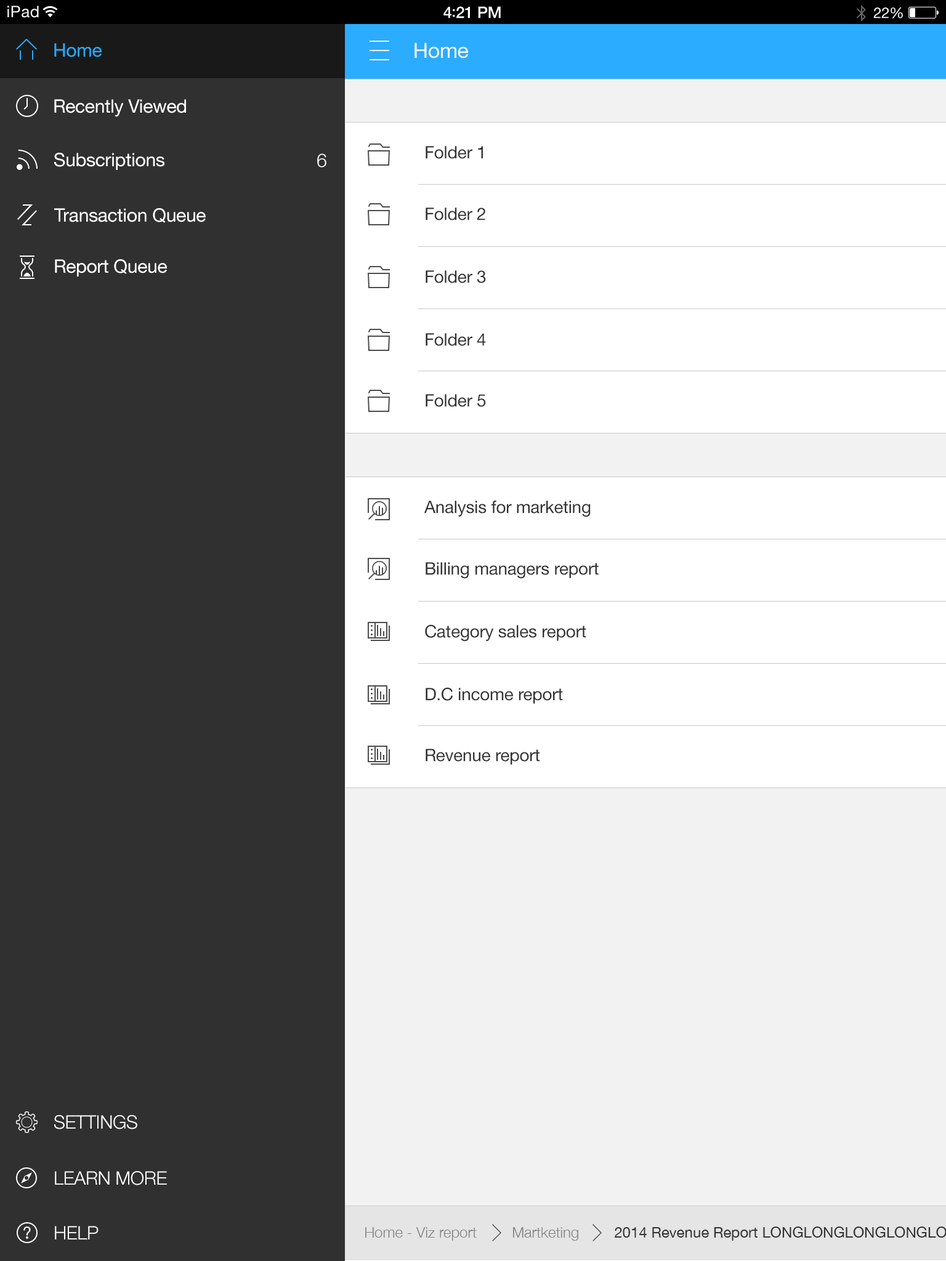
<style>
.page{position:relative;width:946px;height:1261px;background:#303030}
.page>*{position:absolute;margin:0}
.t1{font:16px "HelveticaNeue";letter-spacing:0.02em;color:#ffffff}
.t2{font:16px "HelveticaNeue-Medium";letter-spacing:-0.02em;color:#ffffff}
.t3{font:16px "Avenir-Medium";letter-spacing:-0.02em;color:#ffffff}
.t4{font:14.8px "HelveticaNeue";letter-spacing:-0.02em;color:#ffffff}
.t5{font:18.5px "HelveticaNeue";letter-spacing:-0.01em;color:#2bacfe}
.t6{font:20.9px "HelveticaNeue";letter-spacing:-0.01em;color:#ffffff}
.t7{font:18.5px "HelveticaNeue";letter-spacing:-0.01em;color:#ffffff}
.t8{font:17.2px "HelveticaNeue";letter-spacing:-0.01em;color:#333333}
.t9{font:18.5px "HelveticaNeue-Light";letter-spacing:-0.01em;color:#ffffff}
.t10{font:14.8px "HelveticaNeue-Light";color:#828282}
</style>
<div class="page">
<p class="t1" style="left:7px;top:6px;width:32px;height:12px">iPad</p>
<p class="t2" style="left:443px;top:6px;width:58px;height:12px">4<span class="t3">:</span>21 PM</p>
<p class="t4" style="left:873px;top:7px;width:30px;height:11px">22%</p>
<p class="t5" style="left:54px;top:43px;width:48px;height:14px">Home</p>
<p class="t6" style="left:414px;top:42px;width:54px;height:16px">Home</p>
<p class="t7" style="left:54px;top:99px;width:132px;height:18px">Recently Viewed</p>
<p class="t8" style="left:425px;top:146px;width:58px;height:13px">Folder 1</p>
<p class="t7" style="left:54px;top:153px;width:110px;height:17px">Subscriptions</p>
<p class="t9" style="left:317px;top:153px;width:9px;height:14px">6</p>
<p class="t7" style="left:54px;top:208px;width:152px;height:15px">Transaction Queue</p>
<p class="t8" style="left:425px;top:207px;width:60px;height:13px">Folder 2</p>
<p class="t7" style="left:55px;top:259px;width:112px;height:17px">Report Queue</p>
<p class="t8" style="left:425px;top:270px;width:61px;height:13px">Folder 3</p>
<p class="t8" style="left:425px;top:333px;width:61px;height:13px">Folder 4</p>
<p class="t8" style="left:425px;top:394px;width:61px;height:13px">Folder 5</p>
<p class="t8" style="left:424px;top:501px;width:166px;height:16px">Analysis for marketing</p>
<p class="t8" style="left:425px;top:562px;width:173px;height:17px">Billing managers report</p>
<p class="t8" style="left:425px;top:624px;width:161px;height:18px">Category sales report</p>
<p class="t8" style="left:425px;top:687px;width:138px;height:17px">D.C income report</p>
<p class="t8" style="left:425px;top:749px;width:115px;height:16px">Revenue report</p>
<p class="t9" style="left:54px;top:1115px;width:83px;height:14px">SETTINGS</p>
<p class="t9" style="left:55px;top:1171px;width:112px;height:14px">LEARN MORE</p>
<p class="t9" style="left:55px;top:1226px;width:44px;height:13px">HELP</p>
<p class="t10" style="left:365px;top:1227px;width:112px;height:14px">Home - Viz report</p>
<p class="t10" style="left:513px;top:1227px;width:65px;height:14px">Martketing</p>
</div>
